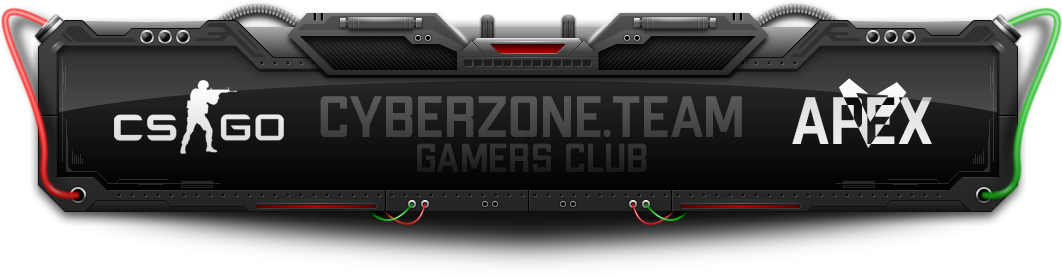
<style>
.page{position:relative;width:1062px;height:275px}
.page>*{position:absolute;margin:0}
.t1{font:58.3px "mr_ApexMk3-Medium";color:#4d4d4d}
.t2{font:66.7px "mr_ApexMk3-Medium";color:#e4e4e4}
.t3{font:40.3px "mr_ApexMk3-Medium";color:#272727}
</style>
<div class="page">
<p class="t1" style="left:320px;top:96px;width:422px;height:41px">CYBERZONE.TEAM</p>
<p class="t2" style="left:792px;top:97px;width:140px;height:47px">apex</p>
<p class="t3" style="left:417px;top:143px;width:230px;height:29px">gamers club</p>
</div>
